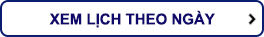
<style>
.page{position:relative;width:264px;height:37px;background:#ffffff}
.page>*{position:absolute;margin:0}
.t1{font:15px "Arial-BoldMT";color:#10096c}
</style>
<div class="page">
<p class="t1" style="left:49px;top:10px;width:166px;height:18px">XEM LỊCH THEO NGÀY</p>
</div>
